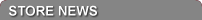
<style>
.page{position:relative;width:202px;height:20px;background:#858585}
.page>*{position:absolute;margin:0}
.t1{font:13.3px "Arial-BoldMT";color:#ffffff}
</style>
<div class="page">
<p class="t1" style="left:9px;top:5px;width:88px;height:11px">STORE NEWS</p>
</div>
